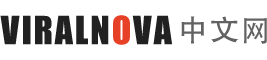
<style>
.page{position:relative;width:267px;height:60px;background:#ffffff}
.page>*{position:absolute;margin:0}
.t1{font:36px "Impact";letter-spacing:0.05em;color:#212121}
.t2{font:36px "Impact";letter-spacing:0.05em;color:#e64127}
.t3{font:30px "AdobeHeitiStd-Regular";letter-spacing:0.05em;color:#626262}
</style>
<div class="page">
<p class="t1" style="left:0px;top:15px;width:172px;height:30px">VIRALN<span class="t2">O</span>VA</p>
<p class="t3" style="left:181px;top:16px;width:86px;height:28px">中文网</p>
</div>
